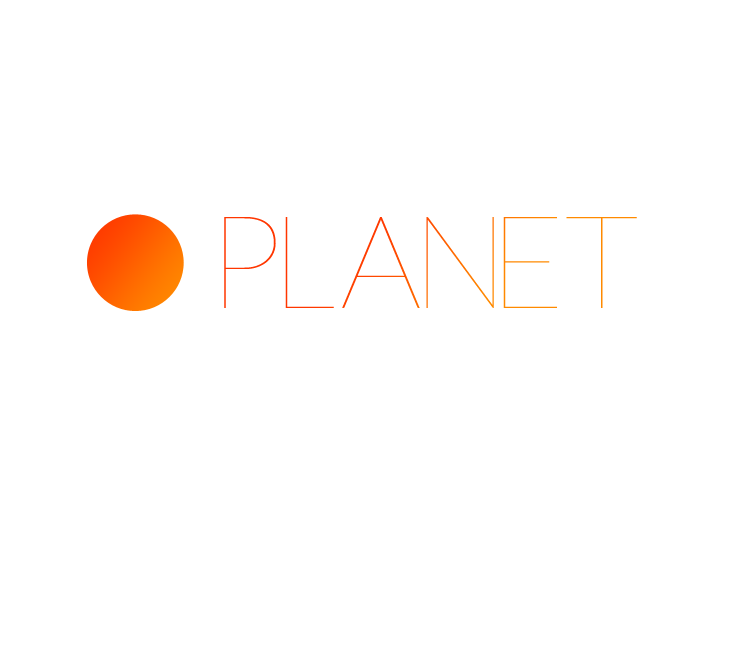
<style>
.page{position:relative;width:750px;height:649px;background:#ffffff}
.page>*{position:absolute;margin:0}
.t1{font:130px "Lato-Hairline"}
</style>
<div class="page">
<p class="t1" style="left:224px;top:217px;width:413px;height:91px">PLANET</p>
</div>
